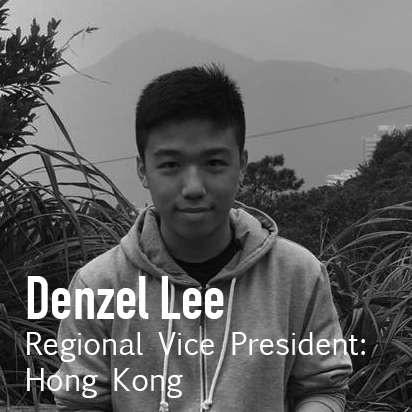
<style>
.page{position:relative;width:412px;height:412px}
.page>*{position:absolute;margin:0}
.t1{font:30px "EuphemiaUCAS";color:#ffffff}
.t2{font:60px "DINCondensed-Bold";color:#ffffff}
</style>
<div class="page">
<p class="t1" style="left:27px;top:276px;width:338px;height:122px"><span class="t2">Denzel Lee<br></span>Regional Vice President:<br>Hong Kong</p>
</div>
